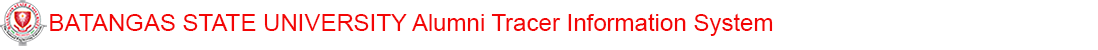
<style>
.page{position:relative;width:1098px;height:50px;background:#ffffff}
.page>*{position:absolute;margin:0}
.t1{font:24px "ArialMT";color:#f30606}
</style>
<div class="page">
<p class="t1" style="left:50px;top:13px;width:723px;height:23px">BATANGAS STATE UNIVERSITY Alumni Tracer Information System</p>
</div>
